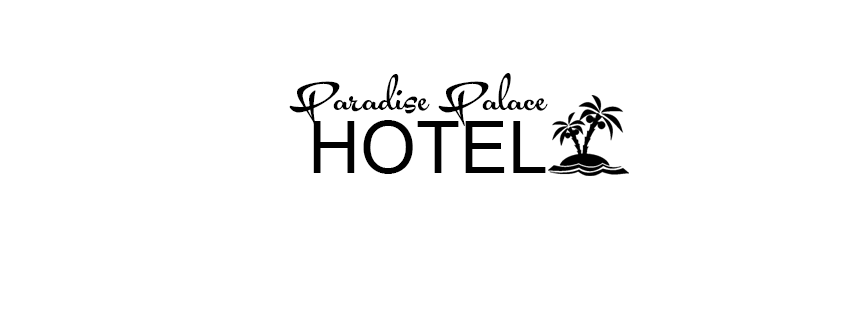
<style>
.page{position:relative;width:851px;height:315px;background:#ffffff}
.page>*{position:absolute;margin:0}
.t1{font:62px "AcryleScriptPersonalUse";color:#000000}
.t2{font:72px "ArialMT";color:#000000}
</style>
<div class="page">
<p class="t1" style="left:289px;top:73px;width:259px;height:53px">Paradise Palace</p>
<p class="t2" style="left:313px;top:120px;width:233px;height:54px">HOTEL</p>
</div>
